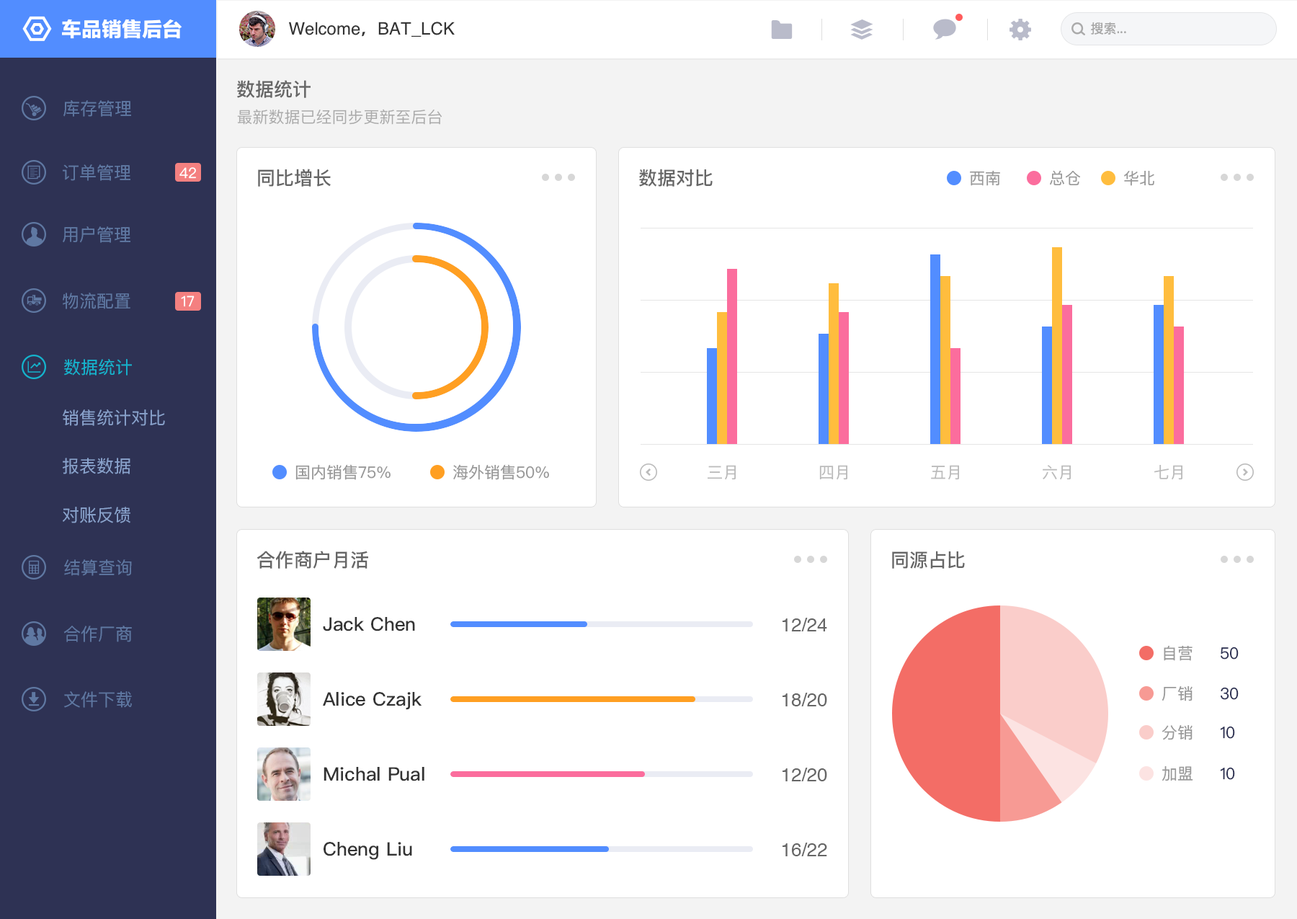
<style>
.page{position:relative;width:1297px;height:919px;background:#ffffff}
.page>*{position:absolute;margin:0}
.t1{font:20.2px "FZLTTHK--GBK1-0";color:#ffffff}
.t2{font:17.3px "Helvetica";color:#333333}
.t3{font:17.3px "AdobeHeitiStd-Regular";color:#333333}
.t4{font:13px "PingFangSC-Regular";color:#aaaaaa}
.t5{font:18.7px "PingFangSC-Medium";color:#666666}
.t6{font:17.3px "PingFangSC-Regular";color:#5f78a2}
.t7{font:15.9px "PingFangSC-Regular";color:#aaaaaa}
.t8{font:14.4px "PingFangSC-Regular";color:#ffffff}
.t9{font:15.9px "PingFangSC-Regular";color:#999999}
.t10{font:17.3px "PingFangSC-Regular";color:#14b5cf}
.t11{font:17.3px "PingFangSC-Regular";color:#8aa3cd}
.t12{font:15.9px "PingFangSC-Regular";color:#bbbbbb}
.t13{font:18.7px "PingFangSC-Medium";color:#333333}
.t14{font:18.7px "Helvetica";color:#666666}
.t15{font:15.9px "PingFangSC-Regular";color:#2e3254}
</style>
<div class="page">
<p class="t1" style="left:62px;top:19px;width:120px;height:20px">车品销售后台</p>
<p class="t2" style="left:289px;top:22px;width:166px;height:15px">Welcome<span class="t3">，</span>BAT_LCK</p>
<p class="t4" style="left:1091px;top:22px;width:36px;height:13px">搜索...</p>
<p class="t5" style="left:237px;top:80px;width:74px;height:18px">数据统计</p>
<p class="t6" style="left:63px;top:100px;width:68px;height:17px">库存管理</p>
<p class="t7" style="left:237px;top:109px;width:206px;height:16px">最新数据已经同步更新至后台</p>
<p class="t6" style="left:63px;top:164px;width:67px;height:17px">订单管理</p>
<p class="t8" style="left:179px;top:167px;width:17px;height:12px">42</p>
<p class="t5" style="left:258px;top:169px;width:73px;height:18px">同比增长</p>
<p class="t5" style="left:639px;top:169px;width:74px;height:18px">数据对比</p>
<p class="t9" style="left:970px;top:170px;width:30px;height:16px">西南</p>
<p class="t9" style="left:1050px;top:170px;width:31px;height:15px">总仓</p>
<p class="t9" style="left:1124px;top:171px;width:31px;height:15px">华北</p>
<p class="t6" style="left:63px;top:226px;width:67px;height:17px">用户管理</p>
<p class="t6" style="left:63px;top:293px;width:67px;height:16px">物流配置</p>
<p class="t8" style="left:181px;top:296px;width:14px;height:11px">17</p>
<p class="t10" style="left:64px;top:359px;width:68px;height:17px">数据统计</p>
<p class="t11" style="left:63px;top:409px;width:102px;height:17px">销售统计对比</p>
<p class="t11" style="left:63px;top:458px;width:67px;height:16px">报表数据</p>
<p class="t9" style="left:296px;top:464px;width:95px;height:16px">国内销售75%</p>
<p class="t9" style="left:453px;top:464px;width:96px;height:16px">海外销售50%</p>
<p class="t12" style="left:708px;top:465px;width:28px;height:15px">三月</p>
<p class="t12" style="left:820px;top:465px;width:28px;height:15px">四月</p>
<p class="t12" style="left:931px;top:465px;width:28px;height:15px">五月</p>
<p class="t12" style="left:1043px;top:465px;width:28px;height:15px">六月</p>
<p class="t12" style="left:1155px;top:465px;width:28px;height:15px">七月</p>
<p class="t11" style="left:63px;top:507px;width:67px;height:16px">对账反馈</p>
<p class="t5" style="left:257px;top:551px;width:111px;height:18px">合作商户月活</p>
<p class="t5" style="left:892px;top:551px;width:73px;height:18px">同源占比</p>
<p class="t6" style="left:64px;top:559px;width:68px;height:17px">结算查询</p>
<p class="t13" style="left:323px;top:617px;width:92px;height:14px">Jack Chen</p>
<p class="t14" style="left:783px;top:618px;width:44px;height:13px">12/24</p>
<p class="t6" style="left:63px;top:626px;width:69px;height:16px">合作厂商</p>
<p class="t9" style="left:1164px;top:645px;width:75px;height:16px">自营     <span class="t15">50</span></p>
<p class="t9" style="left:1162px;top:686px;width:77px;height:15px">厂销     <span class="t15">30</span></p>
<p class="t6" style="left:64px;top:691px;width:68px;height:17px">文件下载</p>
<p class="t13" style="left:323px;top:692px;width:99px;height:18px">Alice Czajk</p>
<p class="t14" style="left:783px;top:693px;width:44px;height:13px">18/20</p>
<p class="t9" style="left:1163px;top:725px;width:72px;height:15px">分销     <span class="t15">10</span></p>
<p class="t13" style="left:324px;top:767px;width:101px;height:14px">Michal Pual</p>
<p class="t14" style="left:783px;top:768px;width:44px;height:13px">12/20</p>
<p class="t9" style="left:1162px;top:766px;width:73px;height:15px">加盟     <span class="t15">10</span></p>
<p class="t13" style="left:324px;top:842px;width:88px;height:18px">Cheng Liu</p>
<p class="t14" style="left:783px;top:843px;width:44px;height:13px">16/22</p>
</div>
